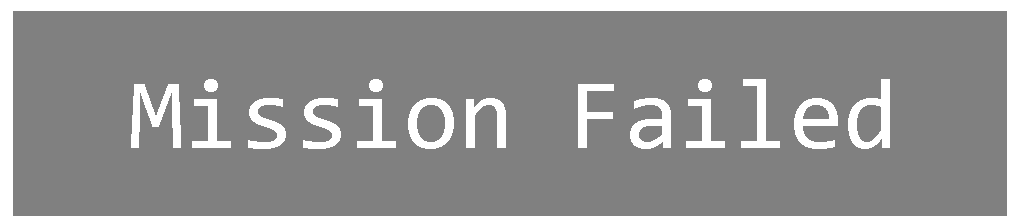
<style>
.page{position:relative;width:1024px;height:220px;background:#808080}
.page>*{position:absolute;margin:0}
.t1{font:100px "Consolas";color:#ffffff}
</style>
<div class="page">
<p class="t1" style="left:131px;top:79px;width:759px;height:70px">Mission Failed</p>
</div>
